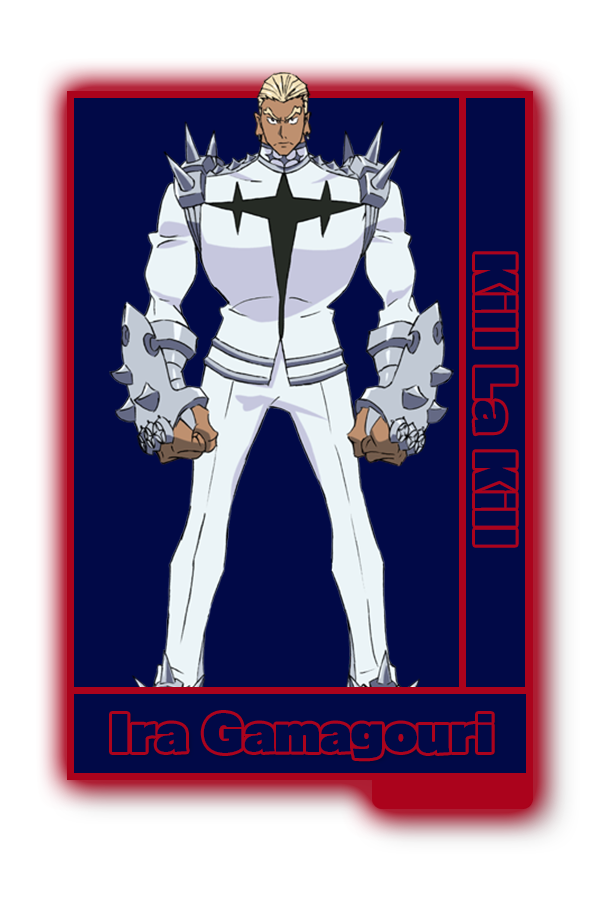
<style>
.page{position:relative;width:600px;height:900px;background:#010947}
.page>*{position:absolute;margin:0}
.t1{font:48.8px "RaglanPunchStd-UB";color:#010947}
.t2{font:45.6px "RaglanPunchStd-UB";color:#010947}
</style>
<div class="page">
<p class="t1" style="left:474px;top:254px;width:42px;height:291px;rotate:90deg">Kill La Kill</p>
<p class="t2" style="left:112px;top:713px;width:380px;height:46px">Ira Gamagouri</p>
</div>
